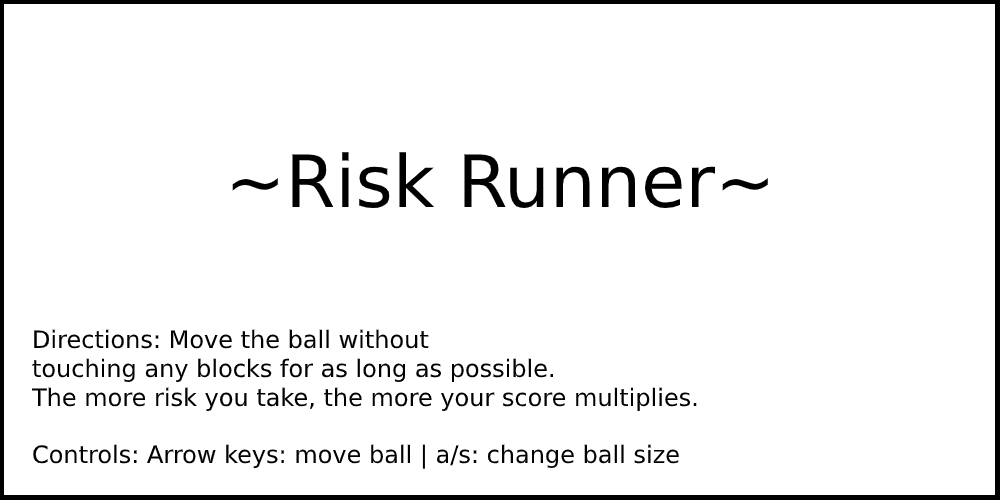
<style>
.page{position:relative;width:1000px;height:500px;background:#ffffff}
.page>*{position:absolute;margin:0}
.t1{font:72px "DejaVuSans";color:#000000}
.t2{font:24px "DejaVuSans";color:#000000}
</style>
<div class="page">
<p class="t1" style="left:232px;top:152px;width:536px;height:57px">~Risk Runner~</p>
<p class="t2" style="left:31px;top:329px;width:666px;height:140px">Directions: Move the ball without <br>touching any blocks for as long as possible.<br>The more risk you take, the more your score multiplies.<br><br>Controls: Arrow keys: move ball | a/s: change ball size</p>
</div>
